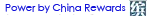
<style>
.page{position:relative;width:147px;height:16px;background:#ffffff}
.page>*{position:absolute;margin:0}
.t1{font:10px "STXihei";color:#1414d9}
</style>
<div class="page">
<p class="t1" style="left:5px;top:3px;width:121px;height:11px">Power by China Rewards</p>
</div>
